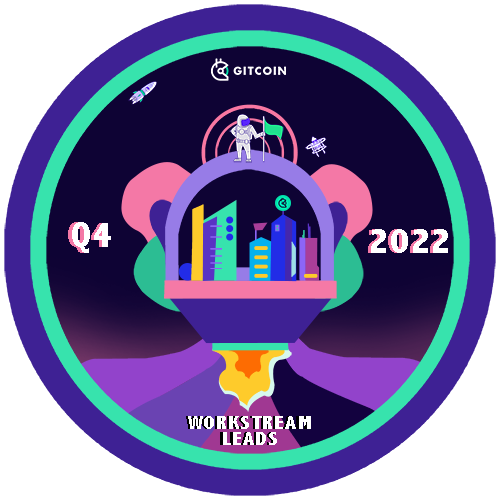
<style>
.page{position:relative;width:500px;height:500px;background:#ffffff}
.page>*{position:absolute;margin:0}
.t1{font:37px "AbadiMT-CondensedExtraBold";letter-spacing:0.05em}
.t2{font:37px "AbadiMT-CondensedExtraBold";letter-spacing:0.05em;color:#ffffff}
.t3{font:19px/16.3px "AbadiMT-CondensedExtraBold";letter-spacing:0.05em;color:#ffffff;scale:1.14 1}
</style>
<div class="page">
<p class="t1" style="left:68px;top:222px;width:40px;height:31px">Q4</p>
<p class="t2" style="left:72px;top:222px;width:39px;height:31px">Q4</p>
<p class="t1" style="left:368px;top:229px;width:77px;height:24px">2022</p>
<p class="t2" style="left:371px;top:229px;width:77px;height:24px">2022</p>
<p class="t3" style="left:188px;top:416px;width:123px;height:29px;text-align:center">WORKSTREAM<br>LEADS</p>
</div>
